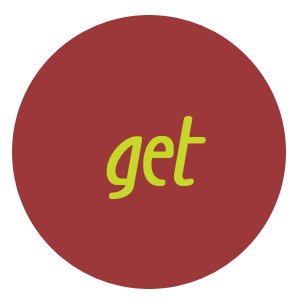
<style>
.page{position:relative;width:300px;height:300px;background:#9c383a}
.page>*{position:absolute;margin:0}
.t1{font:83.3px "Wien";color:#c6d729;font-weight:bold;font-style:italic}
</style>
<div class="page">
<p class="t1" style="left:106px;top:116px;width:100px;height:83px">get</p>
</div>
